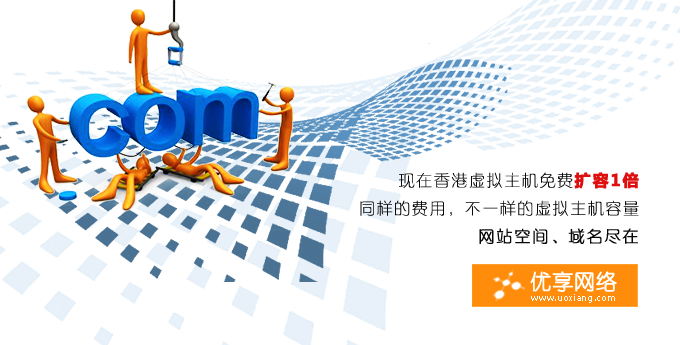
<style>
.page{position:relative;width:680px;height:345px;background:#ffffff}
.page>*{position:absolute;margin:0}
.t1{font:16px "FZXQJW--GB1-0";letter-spacing:0.1em;color:#090909}
.t2{font:16px "MicrosoftYaHei";letter-spacing:0.1em;color:#de0f0f;font-weight:bold}
.t3{font:16px "FZXQJW--GB1-0";letter-spacing:0.1em;color:#090909;font-weight:bold}
.t4{font:21.2px "YouYuan";color:#ffffff;font-weight:bold}
.t5{font:8.8px "Tahoma";letter-spacing:0.068em;color:#ffffff}
</style>
<div class="page">
<p class="t1" style="left:360px;top:172px;width:279px;height:72px;text-align:right">现在香港虚拟主机免费<span class="t2">扩容1倍<br></span>同样的费用，不一样的虚拟主机容量<br><span class="t3">网站空间、域名尽在</span></p>
<p class="t4" style="left:530px;top:271px;width:87px;height:21px">优享网络</p>
<p class="t5" style="left:531px;top:294px;width:84px;height:9px">www.uoxiang.com</p>
</div>
